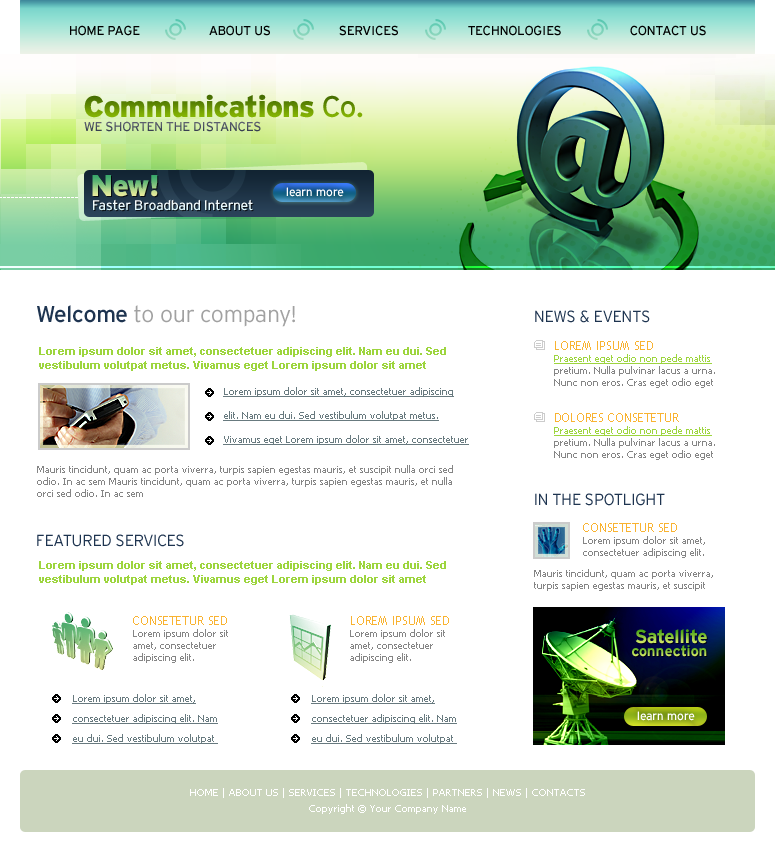
<style>
.page{position:relative;width:775px;height:850px;background:#ffffff}
.page>*{position:absolute;margin:0}
.t1{font:13px "Interstate-Regular";letter-spacing:-0.02em;color:#000000;text-transform:uppercase}
.t2{font:30px "Interstate-Black";letter-spacing:-0.02em}
.t3{font:30px "Interstate-Regular";letter-spacing:-0.02em}
.t4{font:13px "Interstate-Regular";letter-spacing:-0.02em;color:#515565;text-transform:uppercase}
.t5{font:12px "Interstate-Regular";letter-spacing:-0.02em;color:#ffffff}
.t6{font:14px "Interstate-Regular";letter-spacing:-0.02em;color:#e7f8fb}
.t7{font:23px "Interstate-Light";letter-spacing:-0.02em;color:#a1a1a1}
.t8{font:23px "Interstate-Regular";letter-spacing:-0.02em;color:#1e3450}
.t9{font:16px "Interstate-Light";letter-spacing:-0.02em;color:#1e3450;text-transform:uppercase}
.t10{font:10px/12px "Tahoma";color:#858585}
.t11{font:12px/10px "TrebuchetMS";color:#f9b331;text-transform:uppercase}
.t12{font:10px/12px "Tahoma";color:#9dd53e;text-decoration:underline}
.t13{font:11px/14px "Arial-BoldMT";color:#9dd53e}
.t14{font:10px/24px "Tahoma";color:#687a7f;text-decoration:underline}
.t15{font:19px "Interstate-Bold";letter-spacing:-0.02em}
.t16{font:15px "Interstate-Bold";letter-spacing:-0.02em}
.t17{font:10px/20px "Tahoma";color:#687a7f;text-decoration:underline}
.t18{font:10px/16px "Tahoma";color:#ffffff}
</style>
<div class="page">
<p class="t1" style="left:70px;top:25px;width:70px;height:11px">HOME PAGE</p>
<p class="t1" style="left:209px;top:25px;width:61px;height:11px">ABOUT US</p>
<p class="t1" style="left:339px;top:25px;width:59px;height:11px">SERVICES</p>
<p class="t1" style="left:468px;top:25px;width:93px;height:11px">TECHNOLOGIES</p>
<p class="t1" style="left:630px;top:25px;width:76px;height:11px">CONTACT US</p>
<p class="t2" style="left:84px;top:94px;width:279px;height:24px">Communications<span class="t3"> Co.</span></p>
<p class="t4" style="left:84px;top:121px;width:177px;height:11px">WE SHORTEN THE DISTANCES</p>
<p class="t2" style="left:92px;top:175px;width:66px;height:22px">New!</p>
<p class="t5" style="left:286px;top:187px;width:58px;height:10px">learn more</p>
<p class="t6" style="left:93px;top:199px;width:160px;height:12px">Faster Broadband Internet</p>
<p class="t7" style="left:37px;top:305px;width:258px;height:22px"><span class="t8">Welcome </span>to our company!</p>
<p class="t9" style="left:535px;top:310px;width:115px;height:13px">NEWS &amp; EVENTS</p>
<p class="t10" style="left:554px;top:341px;width:161px;height:47px"><span class="t11">LOREM IPSUM sed <br></span><span class="t12">Praesent eget odio non pede mattis </span>pretium. Nulla pulvinar lacus a urna. Nunc non eros. Cras eget odio eget</p>
<p class="t13" style="left:39px;top:347px;width:407px;height:24px">Lorem ipsum dolor sit amet, consectetuer adipiscing elit. Nam eu dui. Sed vestibulum volutpat metus. Vivamus eget Lorem ipsum dolor sit amet</p>
<p class="t14" style="left:223px;top:387px;width:246px;height:58px">Lorem ipsum dolor sit amet, consectetuer adipiscing elit. Nam eu dui. Sed vestibulum volutpat metus. Vivamus eget Lorem ipsum dolor sit amet, consectetuer</p>
<p class="t10" style="left:554px;top:413px;width:161px;height:47px"><span class="t11">DOLORES CONSETETUR <br></span><span class="t12">Praesent eget odio non pede mattis </span>pretium. Nulla pulvinar lacus a urna. Nunc non eros. Cras eget odio eget</p>
<p class="t10" style="left:37px;top:465px;width:416px;height:32px">Mauris tincidunt, quam ac porta viverra, turpis sapien egestas mauris, et suscipit nulla orci sed odio. In ac sem Mauris tincidunt, quam ac porta viverra, turpis sapien egestas mauris, et nulla orci sed odio. In ac sem</p>
<p class="t9" style="left:535px;top:493px;width:130px;height:13px">IN THE SPOTLIGHT</p>
<p class="t9" style="left:37px;top:534px;width:147px;height:13px">Featured Services</p>
<p class="t10" style="left:583px;top:523px;width:122px;height:35px"><span class="t11">Consetetur sed <br></span>Lorem ipsum dolor sit amet, consectetuer adipiscing elit.</p>
<p class="t13" style="left:39px;top:561px;width:407px;height:24px">Lorem ipsum dolor sit amet, consectetuer adipiscing elit. Nam eu dui. Sed vestibulum volutpat metus. Vivamus eget Lorem ipsum dolor sit amet</p>
<p class="t10" style="left:534px;top:569px;width:179px;height:22px">Mauris tincidunt, quam ac porta viverra, turpis sapien egestas mauris, et suscipit</p>
<p class="t10" style="left:133px;top:616px;width:95px;height:47px"><span class="t11">Consetetur sed <br></span>Lorem ipsum dolor sit amet, consectetuer adipiscing elit.</p>
<p class="t10" style="left:350px;top:616px;width:99px;height:47px"><span class="t11">LOREM IPSUM sed <br></span>Lorem ipsum dolor sit amet, consectetuer adipiscing elit.</p>
<p class="t15" style="left:635px;top:629px;width:72px;height:15px">Satellite</p>
<p class="t16" style="left:632px;top:645px;width:75px;height:12px">connection</p>
<p class="t17" style="left:72px;top:694px;width:146px;height:50px">Lorem ipsum dolor sit amet, consectetuer adipiscing elit. Nam eu dui. Sed vestibulum volutpat</p>
<p class="t17" style="left:311px;top:694px;width:146px;height:50px">Lorem ipsum dolor sit amet, consectetuer adipiscing elit. Nam eu dui. Sed vestibulum volutpat</p>
<p class="t5" style="left:637px;top:711px;width:58px;height:10px">learn more</p>
<p class="t18" style="left:190px;top:788px;width:395px;height:26px;text-align:center">HOME | ABOUT US | SERVICES | TECHNOLOGIES | PARTNERS | NEWS | CONTACTS<br>Copyright © Your Company Name</p>
</div>
